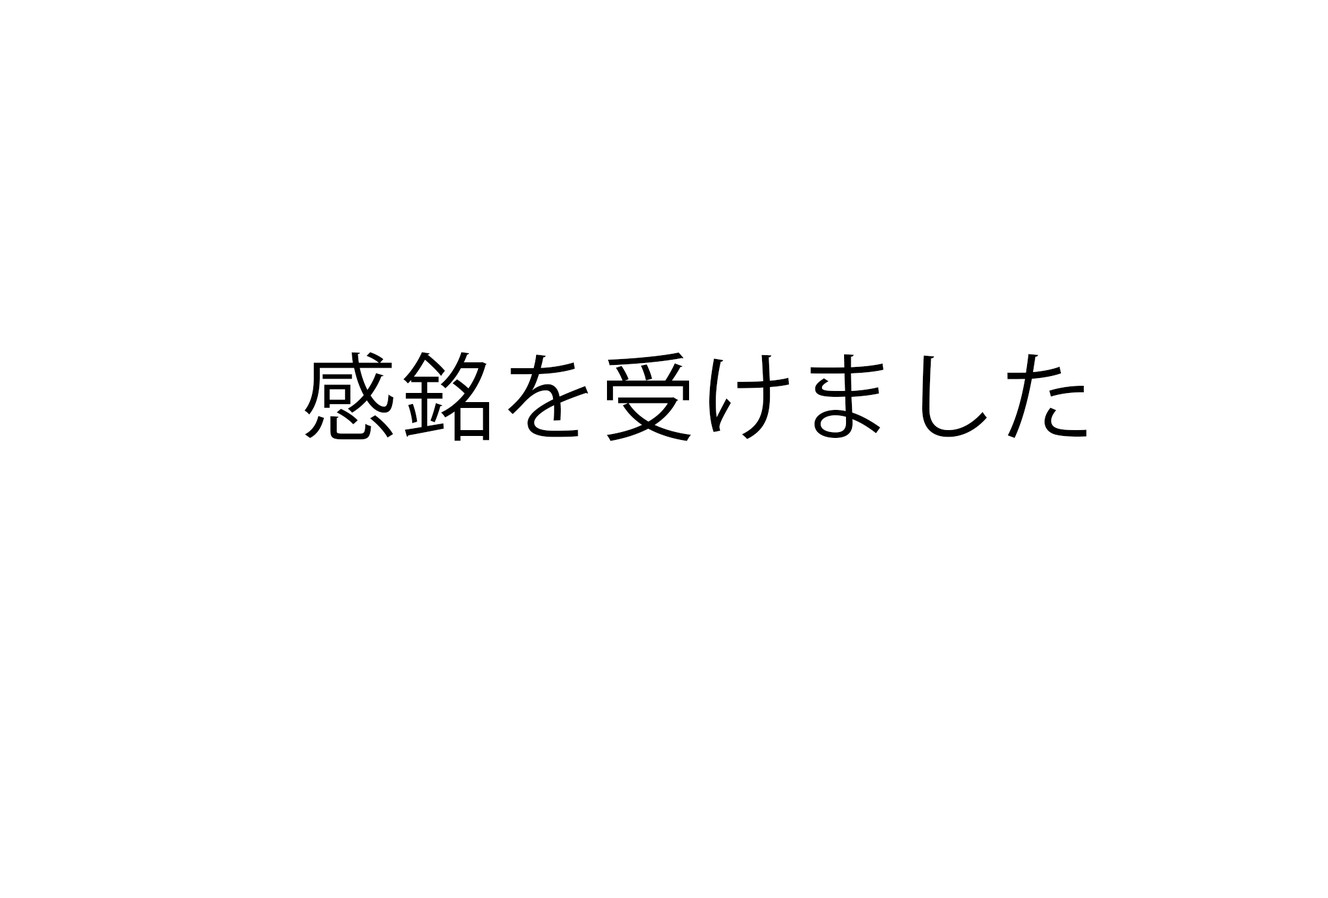
<style>
.page{position:relative;width:1328px;height:898px;background:#ffffff}
.page>*{position:absolute;margin:0}
.t1{font:95px "KozGoPr6N-Regular";letter-spacing:0.05em;color:#000000}
</style>
<div class="page">
<p class="t1" style="left:304px;top:352px;width:783px;height:89px">感銘を受けました</p>
</div>
